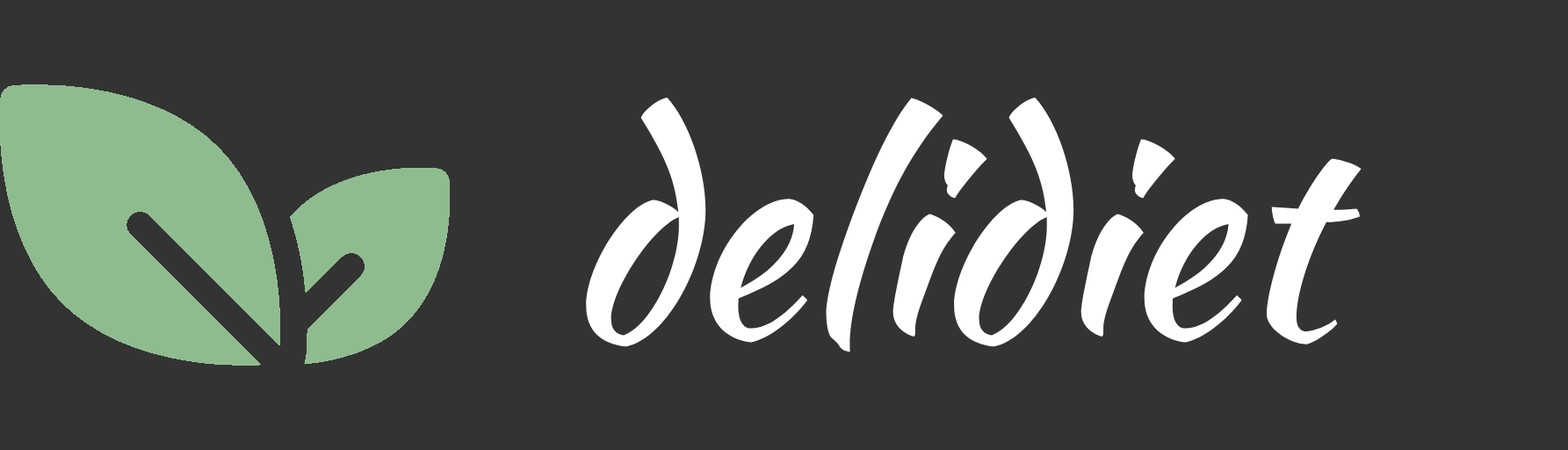
<style>
.page{position:relative;width:1568px;height:450px;background:#333333}
.page>*{position:absolute;margin:0}
.t1{font:281.1px "KaushanScript-Regular";color:#ffffff}
</style>
<div class="page">
<p class="t1" style="left:586px;top:98px;width:776px;height:254px">delidiet</p>
</div>
